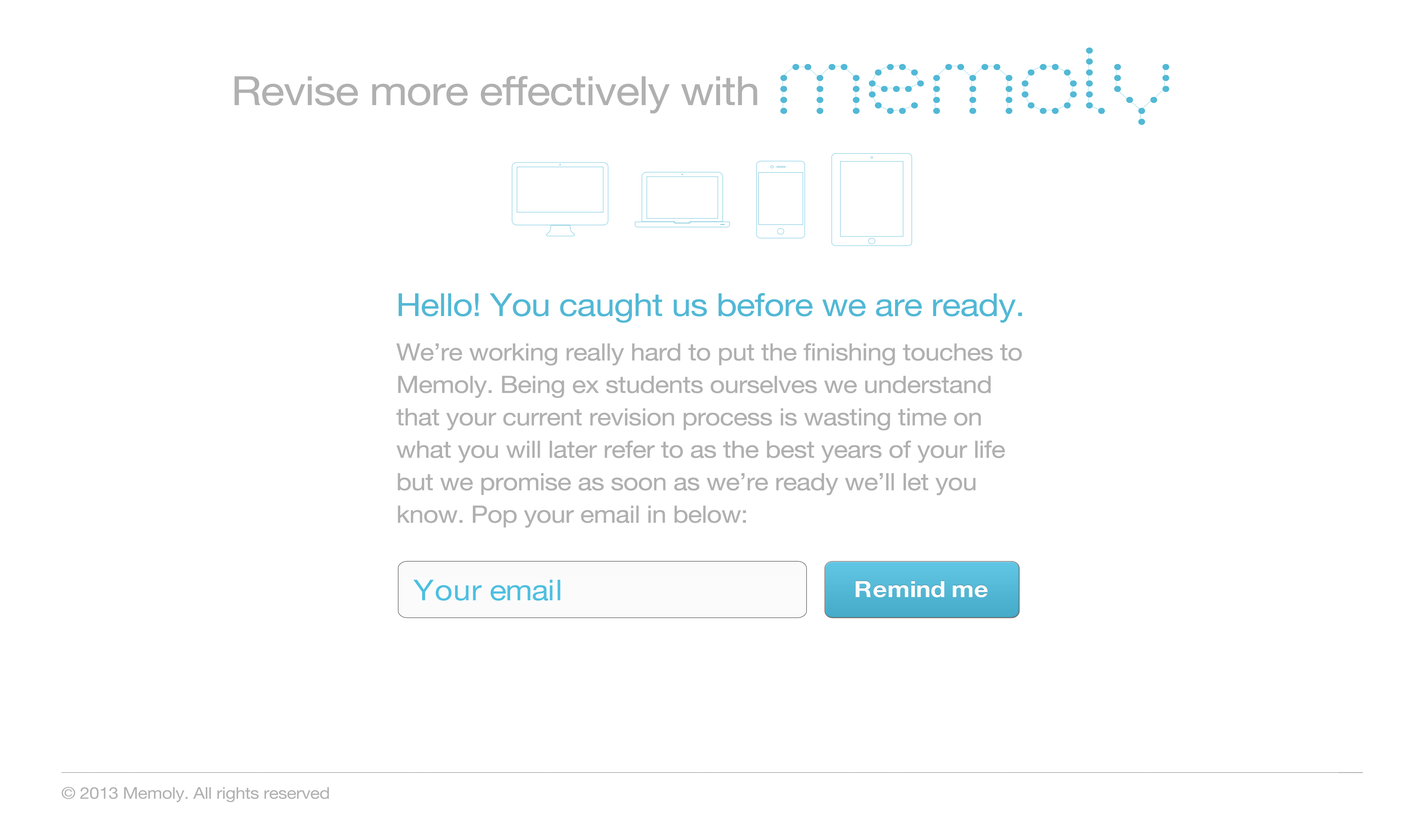
<style>
.page{position:relative;width:1426px;height:836px;background:#ffffff}
.page>*{position:absolute;margin:0}
.t1{font:40.3px "HelveticaNeue";letter-spacing:-0.02em;color:#b0b0b0;scale:1.1 1}
.t2{font:31.9px "HelveticaNeue";letter-spacing:-0.02em;color:#52b8d5;scale:1.1 1}
.t3{font:23.9px/32.5px "HelveticaNeue";letter-spacing:-0.02em;color:#b0b0b0;scale:1.1 1}
.t4{font:28.7px "HelveticaNeue";color:#4ebfe0;scale:1.1 1}
.t5{font:22.6px "HelveticaNeue-Bold";color:#fcfcfc;scale:1.1 1}
.t6{font:16.2px "HelveticaNeue";letter-spacing:-0.02em;color:#b0b0b0;scale:1.1 1}
</style>
<div class="page">
<p class="t1" style="left:234px;top:76px;width:523px;height:38px">Revise more effectively with</p>
<p class="t2" style="left:398px;top:293px;width:624px;height:30px">Hello! You caught us before we are ready.</p>
<p class="t3" style="left:396px;top:343px;width:626px;height:185px">We’re working really hard to put the finishing touches to Memoly. Being ex students ourselves we understand that your current revision process is wasting time on what you will later refer to as the best years of your life but we promise as soon as we’re ready we’ll let you know. Pop your email in below:</p>
<p class="t4" style="left:413px;top:580px;width:147px;height:21px">Your email</p>
<p class="t5" style="left:855px;top:581px;width:133px;height:17px">Remind me</p>
<p class="t6" style="left:62px;top:787px;width:267px;height:16px">© 2013 Memoly. All rights reserved</p>
</div>
